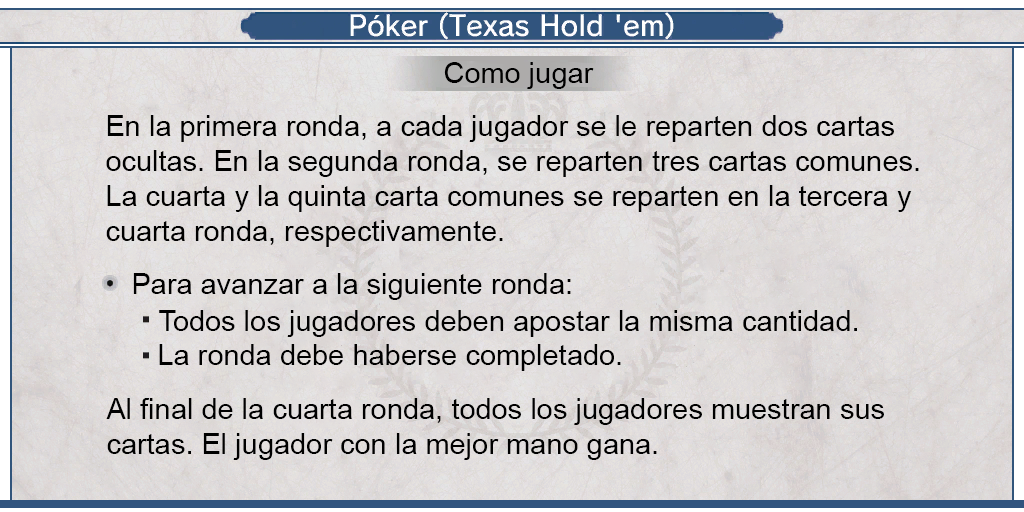
<style>
.page{position:relative;width:1024px;height:512px}
.page>*{position:absolute;margin:0}
.t1{font:29px "ArialMT";color:#000000}
.t2{font:29px/35px "ArialMT";color:#000000}
</style>
<div class="page">
<p class="t1" style="left:444px;top:62px;width:150px;height:27px">Como jugar</p>
<p class="t2" style="left:106px;top:115px;width:813px;height:132px">En la primera ronda, a cada jugador se le reparten dos cartas <br>ocultas. En la segunda ronda, se reparten tres cartas comunes. <br>La cuarta y la quinta carta comunes se reparten en la tercera y <br>cuarta ronda, respectivamente.</p>
<p class="t1" style="left:133px;top:273px;width:438px;height:27px">Para avanzar a la siguiente ronda:</p>
<p class="t1" style="left:159px;top:310px;width:698px;height:27px">Todos los jugadores deben apostar la misma cantidad.</p>
<p class="t1" style="left:159px;top:344px;width:462px;height:27px">La ronda debe haberse completado.</p>
<p class="t2" style="left:106px;top:398px;width:778px;height:62px">Al final de la cuarta ronda, todos los jugadores muestran sus <br>cartas. El jugador con la mejor mano gana.</p>
</div>
